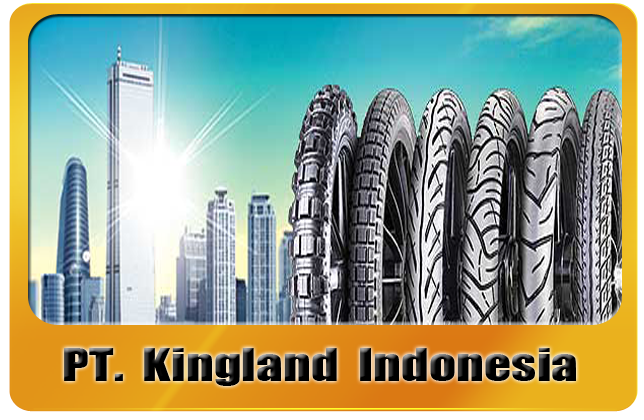
<style>
.page{position:relative;width:644px;height:420px}
.page>*{position:absolute;margin:0}
.t1{font:42.3px "Impact";color:#000000;scale:1.26 1}
</style>
<div class="page">
<p class="t1" style="left:64px;top:348px;width:512px;height:38px">PT.  Kingland  Indonesia</p>
</div>
